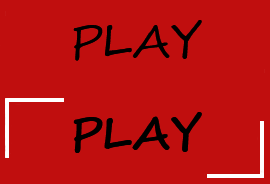
<style>
.page{position:relative;width:270px;height:184px;background:#c00e0e}
.page>*{position:absolute;margin:0}
.t1{font:45px "SegoeScript-Bold";color:#000000}
</style>
<div class="page">
<p class="t1" style="left:73px;top:112px;width:129px;height:41px">PLAY</p>
</div>
